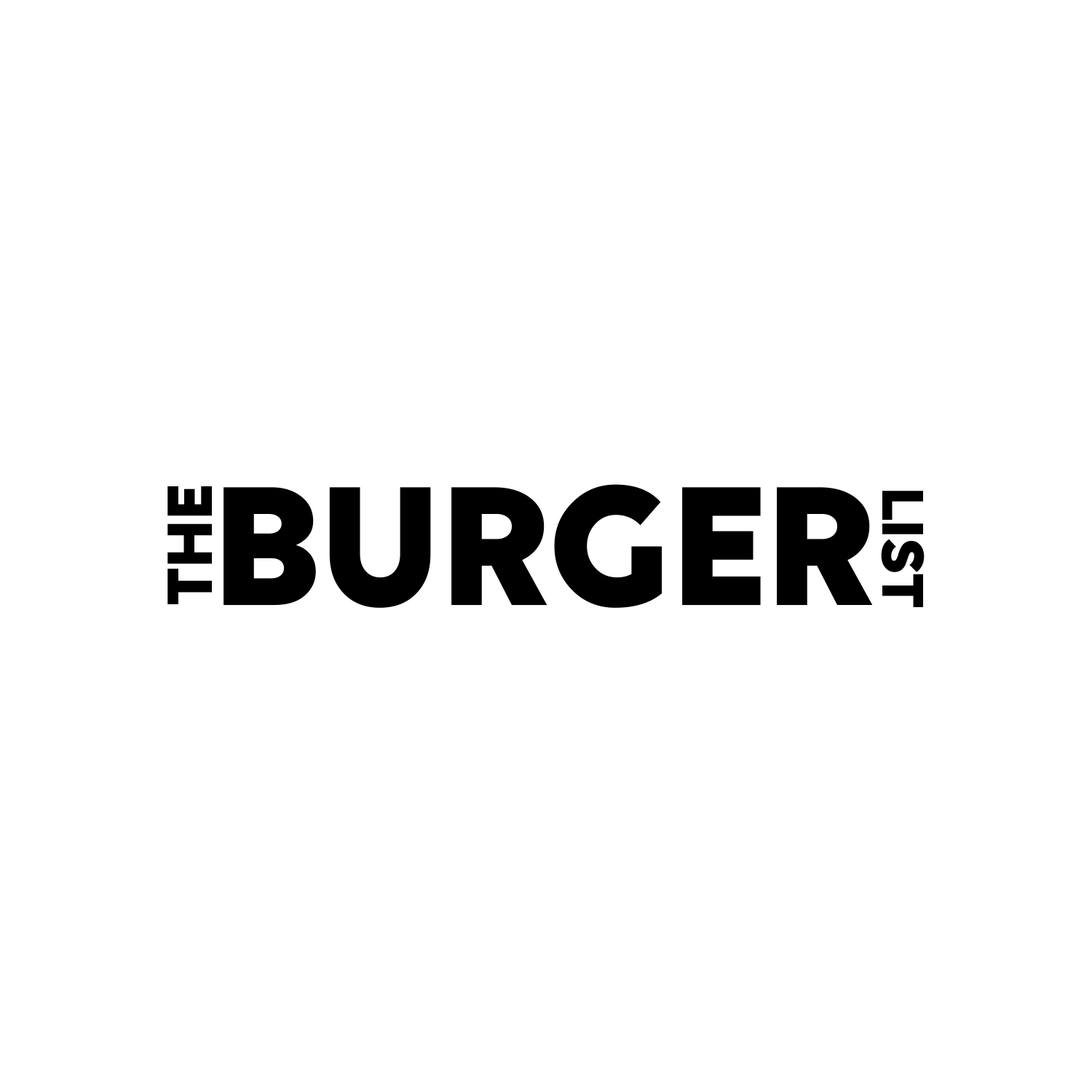
<style>
.page{position:relative;width:1092px;height:1092px;background:#ffffff}
.page>*{position:absolute;margin:0}
.t1{font:183.5px "Volte-Bold";color:#000000}
.t2{font:68.9px "Volte-Bold";color:#000000}
.t3{font:63.5px "Volte-Bold";color:#000000}
</style>
<div class="page">
<p class="t1" style="left:223px;top:484px;width:650px;height:124px">BURGER</p>
<p class="t2" style="left:167px;top:486px;width:45px;height:118px;rotate:-90deg">THE</p>
<p class="t3" style="left:881px;top:491px;width:44px;height:116px;rotate:90deg">LIST</p>
</div>
